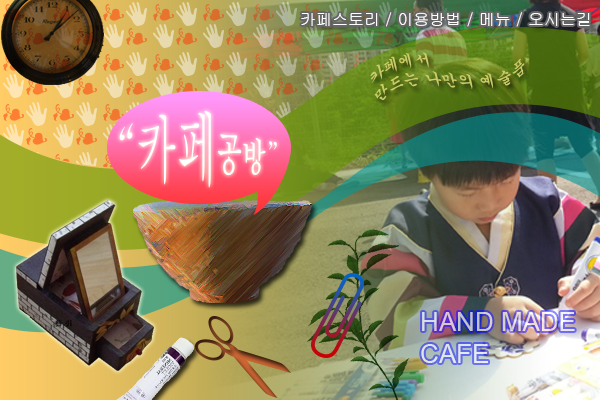
<style>
.page{position:relative;width:600px;height:400px}
.page>*{position:absolute;margin:0}
.t1{font:15.9px "Gulim";color:#ffffff}
.t2{font:16px "Gungsuh";color:#cccc66}
.t3{font:40.2px "Batang";color:#ffffff}
.t4{font:25.1px "Batang";color:#ffffff}
</style>
<div class="page">
<p class="t1" style="left:301px;top:12px;width:289px;height:15px">카페스토리 / 이용방법 / 메뉴 / 오시는길</p>
<p class="t2" style="left:370px;top:52px;width:155px;height:49px;rotate:-14deg">카페에서<br>만드는 나만의 예술품</p>
<p class="t3" style="left:119px;top:110px;width:158px;height:78px">“카페<span class="t4">공방”</span></p>
</div>
